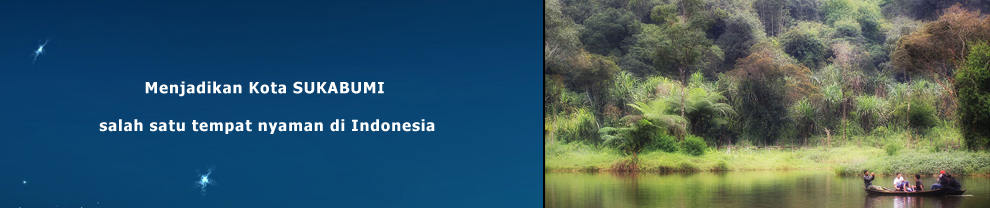
<style>
.page{position:relative;width:990px;height:208px}
.page>*{position:absolute;margin:0}
.t1{font:15.5px/18.8px "Tahoma-Bold";letter-spacing:0.05em;color:#fefefe}
</style>
<div class="page">
<p class="t1" style="left:99px;top:81px;width:336px;height:53px;text-align:center">Menjadikan Kota SUKABUMI <br><br>salah satu tempat nyaman di Indonesia</p>
</div>
